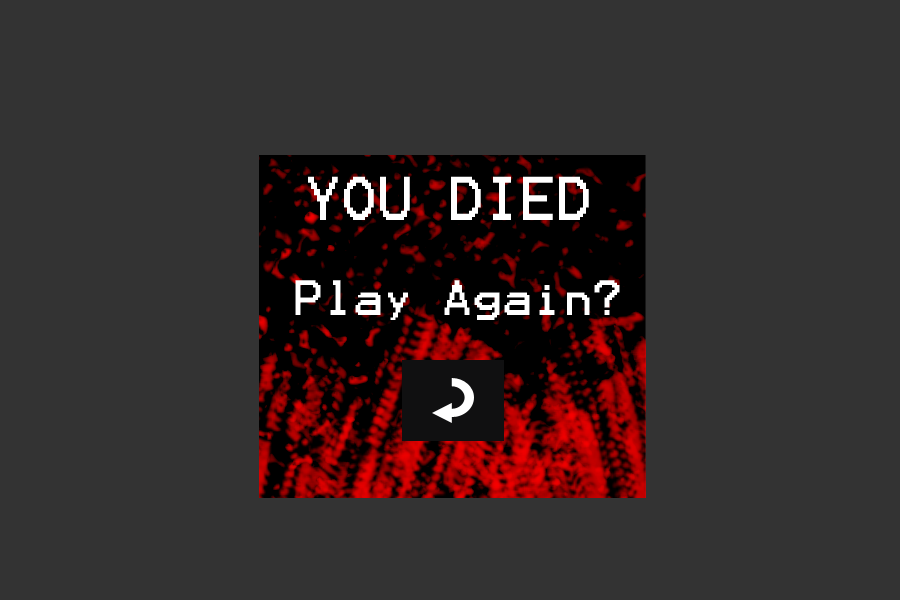
<style>
.page{position:relative;width:900px;height:600px;background:#333333}
.page>*{position:absolute;margin:0}
.t1{font:49.5px "Terminal";color:#ffffff;scale:0.97 1}
.t2{font:39.8px "Terminal";color:#ffffff}
</style>
<div class="page">
<p class="t1" style="left:308px;top:176px;width:281px;height:44px">YOU DIED</p>
<p class="t2" style="left:295px;top:280px;width:325px;height:40px">Play Again?</p>
</div>
